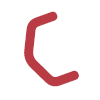
<style>
.page{position:relative;width:100px;height:100px;background:#ffffff}
.page>*{position:absolute;margin:0}
.t1{font:92.8px "OCRAStd";color:#b93c45}
</style>
<div class="page">
<p class="t1" style="left:24px;top:11px;width:55px;height:76px;rotate:-20deg">C</p>
</div>
